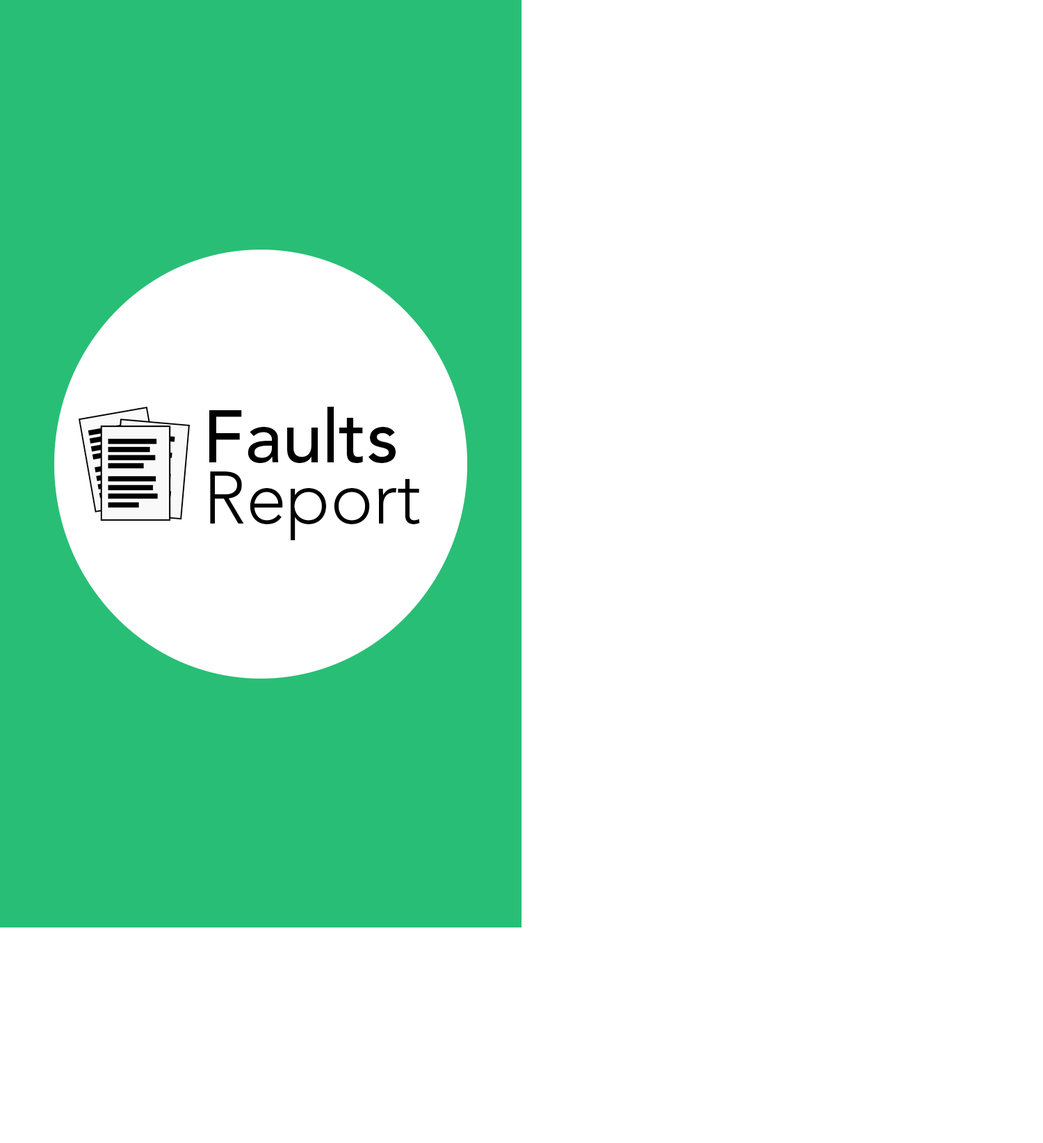
<style>
.page{position:relative;width:1043px;height:1143px;background:#ffffff}
.page>*{position:absolute;margin:0}
.t1{font:73.8px/61.2px "AvenirLTStd-Medium";color:#000000}
.t2{font:73.8px/61.2px "AvenirLTStd-Light";color:#000000}
</style>
<div class="page">
<p class="t1" style="left:209px;top:407px;width:211px;height:133px">Faults<br><span class="t2">Report</span></p>
</div>
